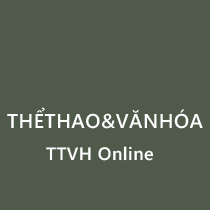
<style>
.page{position:relative;width:210px;height:210px;background:#4f5a4b}
.page>*{position:absolute;margin:0}
.t1{font:20px "SegoeWP-Semibold";letter-spacing:0.025em;color:#ffffff}
.t2{font:18px "SegoeWP-Semibold";letter-spacing:0.025em;color:#ffffff}
</style>
<div class="page">
<p class="t1" style="left:7px;top:107px;width:196px;height:22px">THỂTHAO&amp;VĂNHÓA</p>
<p class="t2" style="left:46px;top:146px;width:108px;height:15px">TTVH Online</p>
</div>
